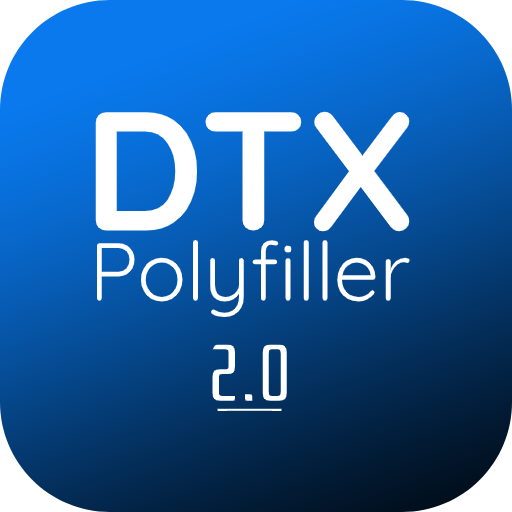
<style>
.page{position:relative;width:512px;height:512px}
.page>*{position:absolute;margin:0}
.t1{font:169px "Quicksand-Bold";color:#ffffff}
.t2{font:82px "Quicksand-Regular";color:#ffffff}
.t3{font:80px "Rationale-Regular";color:#ffffff}
</style>
<div class="page">
<p class="t1" style="left:95px;top:111px;width:315px;height:121px">DTX</p>
<p class="t2" style="left:96px;top:240px;width:314px;height:78px">Polyfiller</p>
<p class="t3" style="left:212px;top:344px;width:75px;height:57px">2.0</p>
</div>
